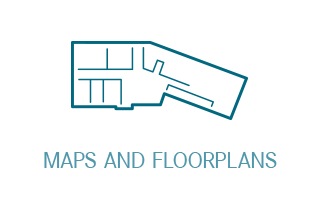
<style>
.page{position:relative;width:320px;height:200px;background:#ffffff}
.page>*{position:absolute;margin:0}
.t1{font:24px "CorporateS-Regular";color:#5097ab}
</style>
<div class="page">
<p class="t1" style="left:44px;top:152px;width:233px;height:16px">MAPS AND FLOORPLANS</p>
</div>
